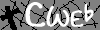
<style>
.page{position:relative;width:100px;height:30px;background:#808080}
.page>*{position:absolute;margin:0}
.t1{font:29.5px "RepriseChords";letter-spacing:-0.025em;color:#ffffff;scale:1.47 1}
</style>
<div class="page">
<p class="t1" style="left:25px;top:2px;width:69px;height:25px">CWeb</p>
</div>
